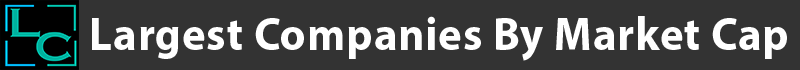
<style>
.page{position:relative;width:800px;height:70px;background:#333333}
.page>*{position:absolute;margin:0}
.t1{font:47.2px "MyriadPro-Bold";letter-spacing:0.02em;color:#ffffff;scale:0.94 1}
</style>
<div class="page">
<p class="t1" style="left:92px;top:16px;width:695px;height:45px">Largest Companies By Market Cap</p>
</div>
